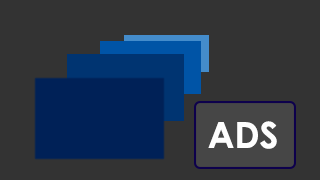
<style>
.page{position:relative;width:320px;height:180px;background:#333333}
.page>*{position:absolute;margin:0}
.t1{font:36px "CenturyGothic-Bold";color:#fefefe}
</style>
<div class="page">
<p class="t1" style="left:208px;top:121px;width:69px;height:28px">ADS</p>
</div>
